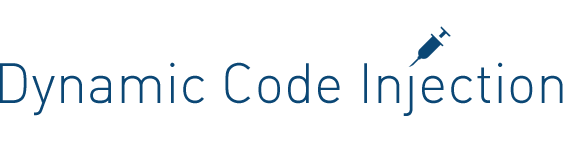
<style>
.page{position:relative;width:563px;height:153px;background:#ffffff}
.page>*{position:absolute;margin:0}
.t1{font:56px "DIN-LightAlternate";color:#0b4775}
</style>
<div class="page">
<p class="t1" style="left:0px;top:62px;width:563px;height:54px">Dynamic Code Injection</p>
</div>
